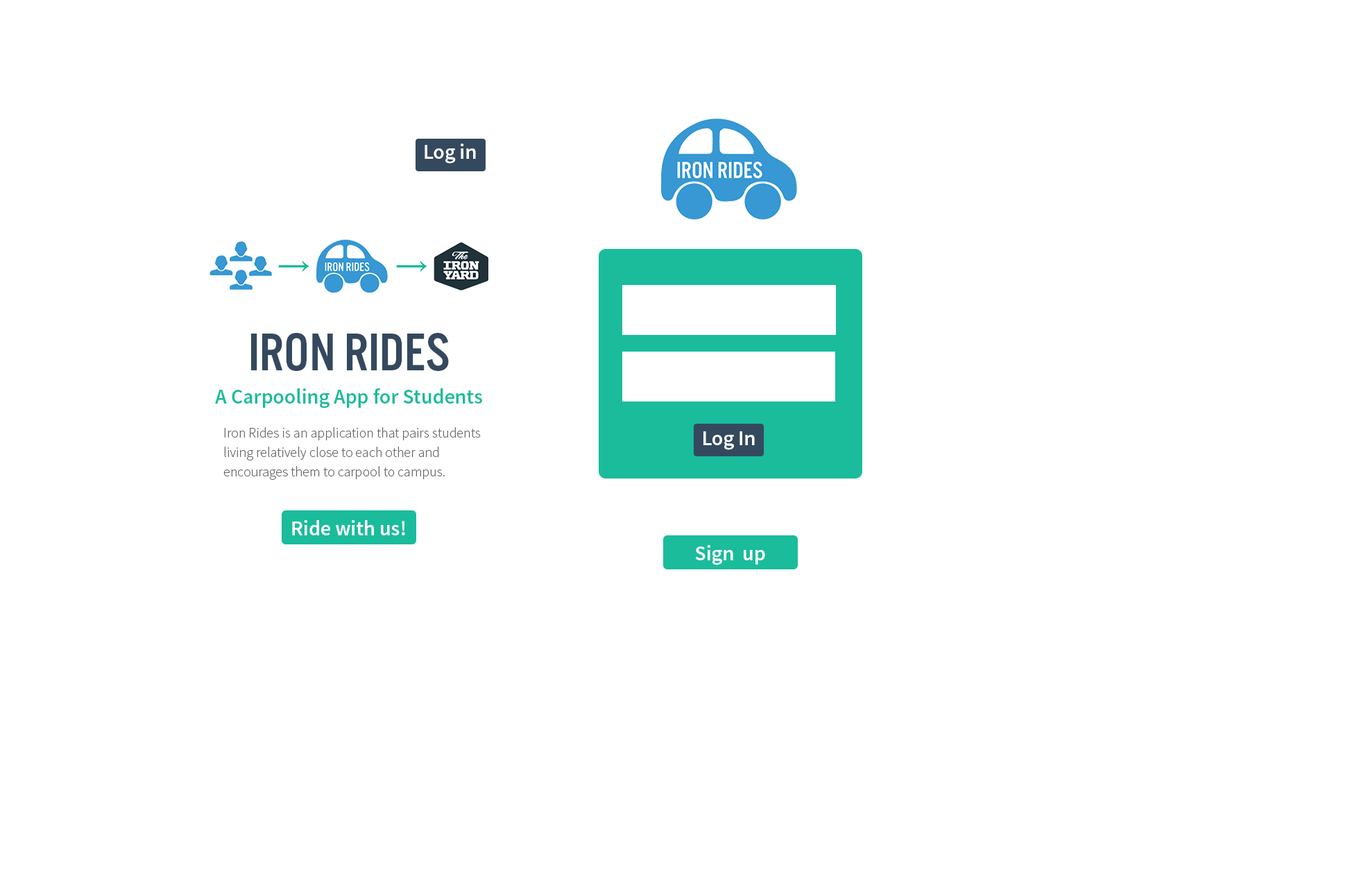
<style>
.page{position:relative;width:1368px;height:871px;background:#ffffff}
.page>*{position:absolute;margin:0}
.t1{font:20.8px "SourceSansPro-Semibold";color:#ffffff}
.t2{font:55.5px "AlternateGotNo3D";color:#34495e}
.t3{font:20.8px "SourceSansPro-Semibold";color:#1abc9c}
.t4{font:13.9px/19.4px "SourceSansPro-Light";color:#666666}
.t5{font:20.8px "SourceSansPro-Semibold";color:#fdfdfd}
</style>
<div class="page">
<p class="t1" style="left:425px;top:144px;width:51px;height:20px">Log in</p>
<p class="t2" style="left:251px;top:333px;width:198px;height:38px">IRON RIDES</p>
<p class="t3" style="left:215px;top:389px;width:267px;height:20px">A Carpooling App for Students</p>
<p class="t4" style="left:223px;top:427px;width:258px;height:53px">Iron Rides is an application that pairs students living relatively close to each other and <br>encourages them to carpool to campus.</p>
<p class="t1" style="left:704px;top:432px;width:51px;height:18px">Log In</p>
<p class="t5" style="left:292px;top:520px;width:113px;height:16px">Ride with us!</p>
<p class="t5" style="left:695px;top:545px;width:70px;height:20px">Sign  up</p>
</div>
